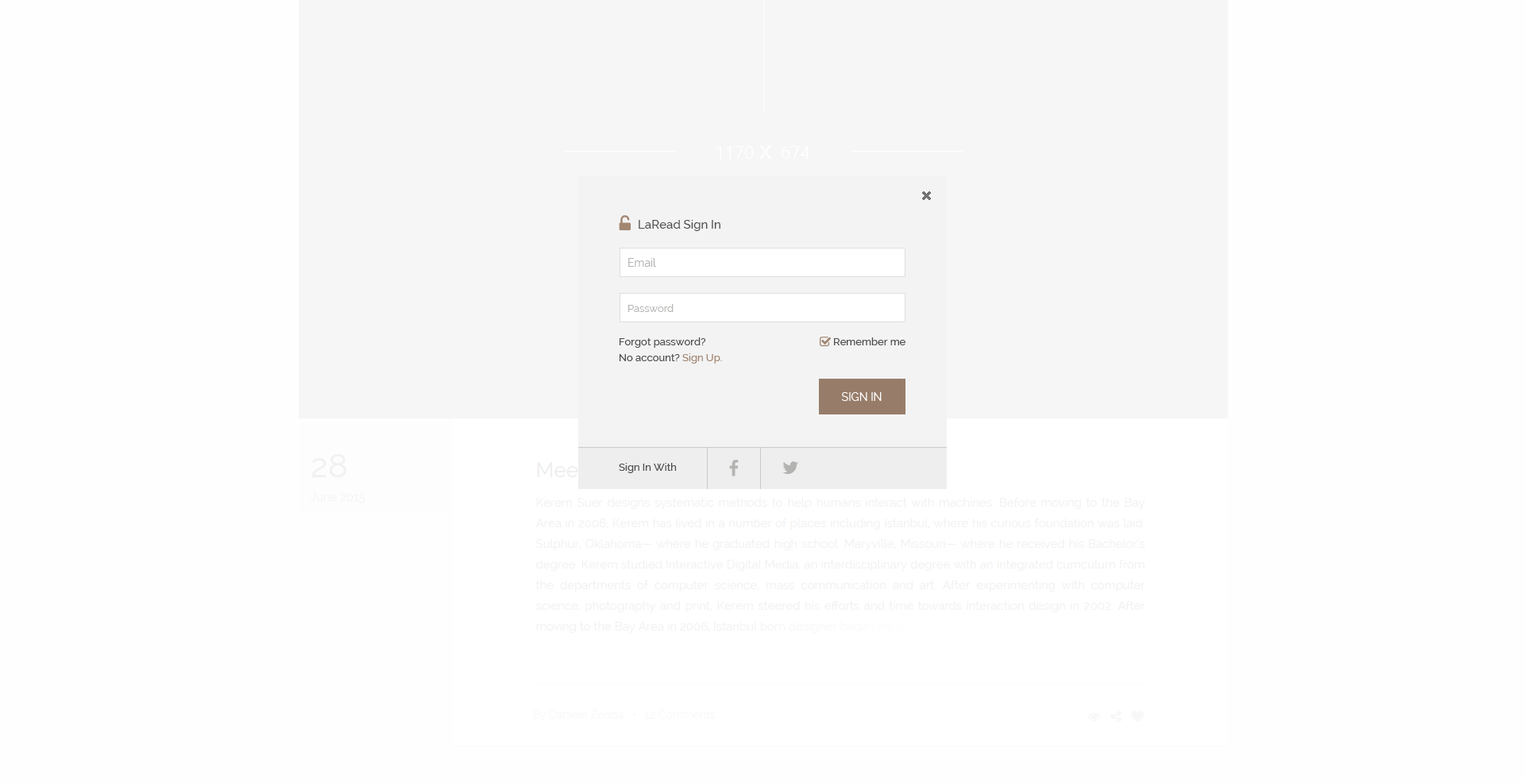
<style>
.page{position:relative;width:1525px;height:782px;background:#fefefe}
.page>*{position:absolute;margin:0}
.t1{font:11.9px "Raleway-Medium";color:#4d4d4f}
.t2{font:11.1px "Raleway";color:#b3b3b1}
.t3{font:10.3px "Raleway";color:#b3b3b1}
.t4{font:10.3px/15.9px "Raleway-Medium";color:#4d4d4f}
.t5{font:10.3px/15.9px "Raleway-Medium";color:#a28671}
.t6{font:10.3px "Raleway-Medium";color:#4e4e4e}
.t7{font:11.1px "Raleway-Medium";color:#ffffff;text-transform:uppercase}
.t8{font:11.1px "Raleway";color:#ffffff;text-transform:uppercase}
.t9{font:10.3px "Raleway-Medium";color:#4d4d4f}
</style>
<div class="page">
<p class="t1" style="left:638px;top:220px;width:82px;height:11px">LaRead Sign In</p>
<p class="t2" style="left:628px;top:258px;width:28px;height:9px">Email</p>
<p class="t3" style="left:628px;top:304px;width:45px;height:8px">Password</p>
<p class="t4" style="left:619px;top:337px;width:103px;height:27px">Forgot password?<br>No account? <span class="t5">Sign Up.</span></p>
<p class="t6" style="left:834px;top:337px;width:71px;height:8px">Remember me</p>
<p class="t7" style="left:841px;top:392px;width:40px;height:9px">SIGN IN</p>
<p class="t8" style="left:841px;top:392px;width:40px;height:9px">SIGN IN</p>
<p class="t9" style="left:619px;top:463px;width:58px;height:10px">Sign In With</p>
</div>
